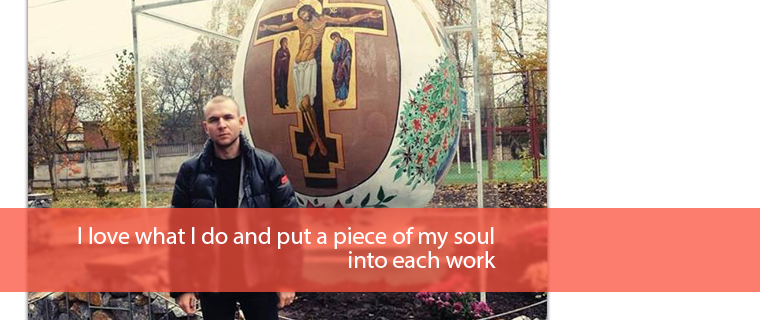
<style>
.page{position:relative;width:760px;height:320px;background:#ffffff}
.page>*{position:absolute;margin:0}
.t1{font:24px/24px "MyriadPro-Regular";color:#ffffff}
</style>
<div class="page">
<p class="t1" style="left:78px;top:227px;width:418px;height:41px;text-align:right">I love what I do and put a piece of my soul<br>into each work</p>
</div>
